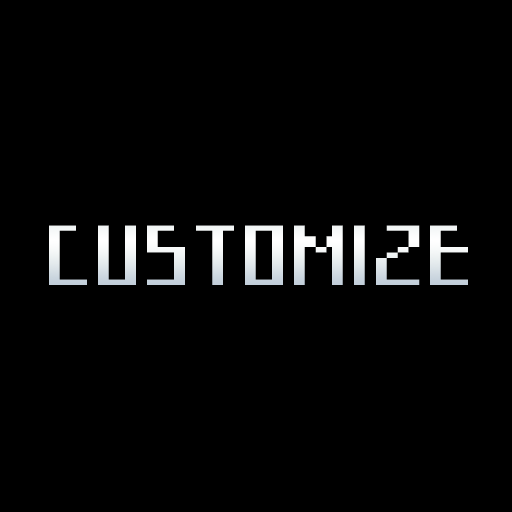
<style>
.page{position:relative;width:512px;height:512px;background:#000000}
.page>*{position:absolute;margin:0}
.t1{font:79.2px "Starcadia"}
</style>
<div class="page">
<p class="t1" style="left:49px;top:225px;width:419px;height:60px">CUSTOMIZE</p>
</div>
